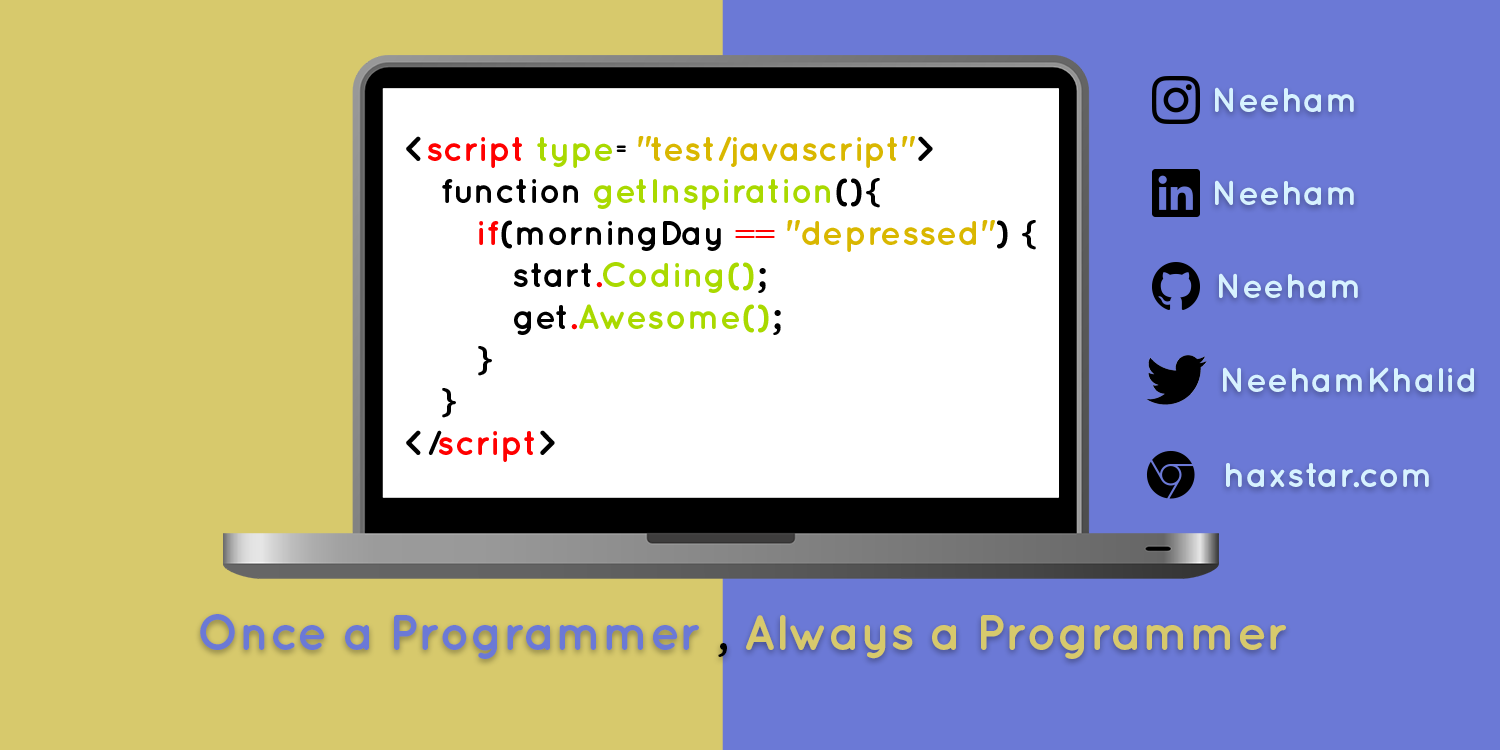
<style>
.page{position:relative;width:1500px;height:750px;background:#6b79d6}
.page>*{position:absolute;margin:0}
.t1{font:35px "Quicksand-Bold";color:#d6f2ff}
.t2{font:35px "Quicksand-Bold";color:#d9b700}
.t3{font:35px "Quicksand-Bold";color:#000000}
.t4{font:35px "Quicksand-Bold";color:#ff0000}
.t5{font:35px "Quicksand-Bold";color:#a9d900}
.t6{font:35px "TimesNewRomanPS-BoldMT";color:#ff0000}
</style>
<div class="page">
<p class="t1" style="left:1215px;top:87px;width:139px;height:25px">Neeham</p>
<p class="t2" style="left:406px;top:136px;width:630px;height:326px"><span class="t3">&lt;</span><span class="t4">script </span><span class="t5">type</span><span class="t3">=</span>"test/javascript"<span class="t3">&gt;<br> function </span><span class="t5">getInspiration</span><span class="t3">(){<br>  </span><span class="t4">if</span><span class="t3">(morningDay </span><span class="t6">== </span>"depressed"<span class="t3">) {<br>   start</span><span class="t4">.</span><span class="t5">Coding()</span><span class="t3">;<br>   get</span><span class="t4">.</span><span class="t5">Awesome()</span><span class="t3">;<br>  }<br> }<br>&lt;/</span><span class="t4">script</span><span class="t3">&gt;</span></p>
<p class="t1" style="left:1215px;top:180px;width:139px;height:25px">Neeham</p>
<p class="t1" style="left:1219px;top:273px;width:139px;height:25px">Neeham</p>
<p class="t1" style="left:1223px;top:367px;width:251px;height:25px">NeehamKhalid</p>
<p class="t1" style="left:1226px;top:463px;width:203px;height:25px">haxstar.com</p>
</div>
